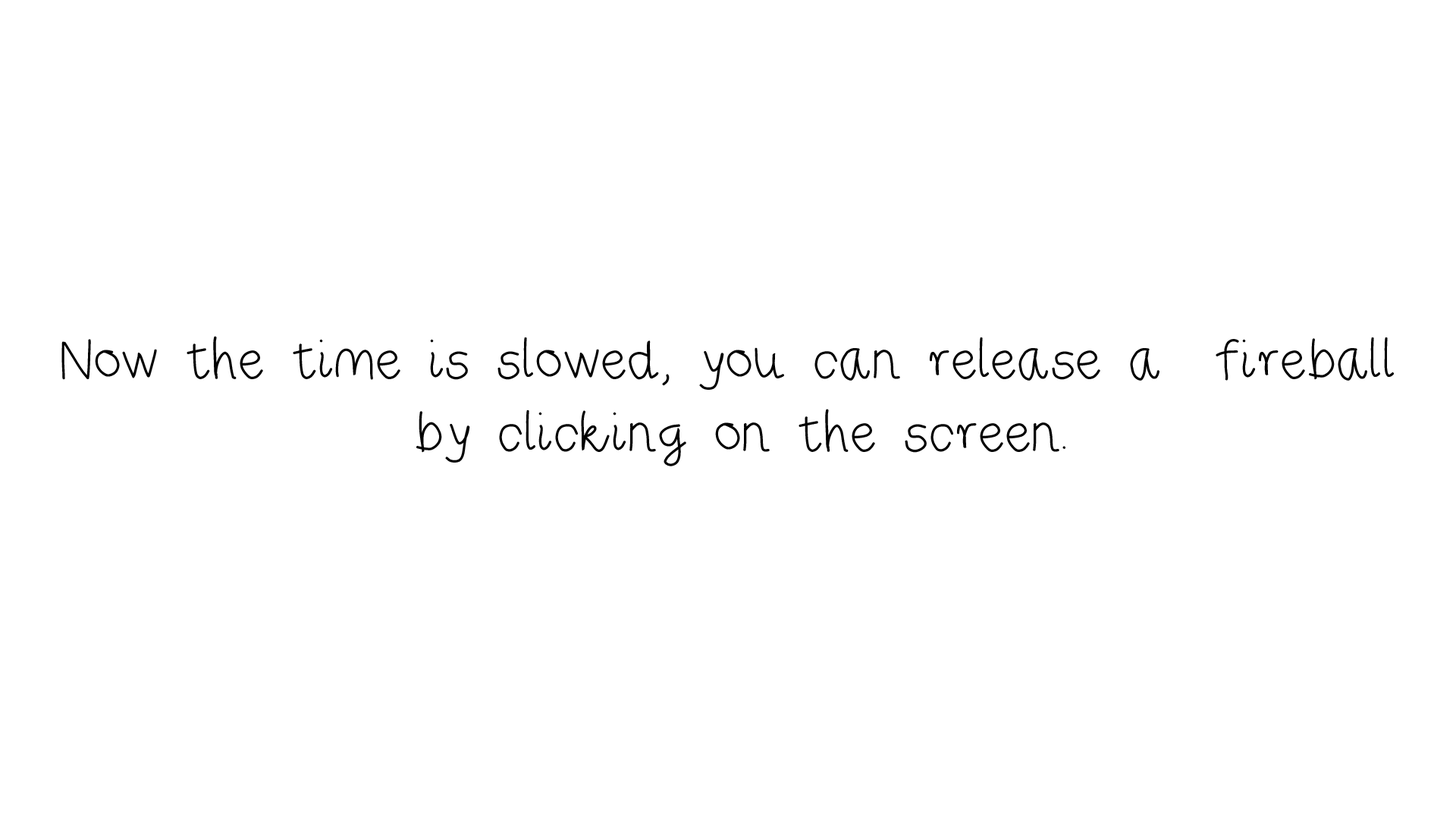
<style>
.page{position:relative;width:1456px;height:819px;background:#ffffff}
.page>*{position:absolute;margin:0}
.t1{font:60.7px "RiseStarHand";color:#000000}
</style>
<div class="page">
<p class="t1" style="left:61px;top:336px;width:1333px;height:130px;text-align:center">Now the time is slowed, you can release a  fireball <br>by clicking on the screen.</p>
</div>
